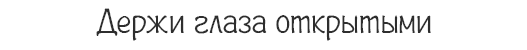
<style>
.page{position:relative;width:527px;height:50px;background:#ffffff}
.page>*{position:absolute;margin:0}
.t1{font:35px "Plainot";color:#2e2e2e}
</style>
<div class="page">
<p class="t1" style="left:96px;top:8px;width:335px;height:33px">Держи глаза открытыми</p>
</div>
